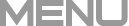
<style>
.page{position:relative;width:129px;height:26px;background:#999999}
.page>*{position:absolute;margin:0}
.t1{font:50px "Bitsumishi";color:#999999}
</style>
<div class="page">
<p class="t1" style="left:0px;top:0px;width:128px;height:26px">menu</p>
</div>
